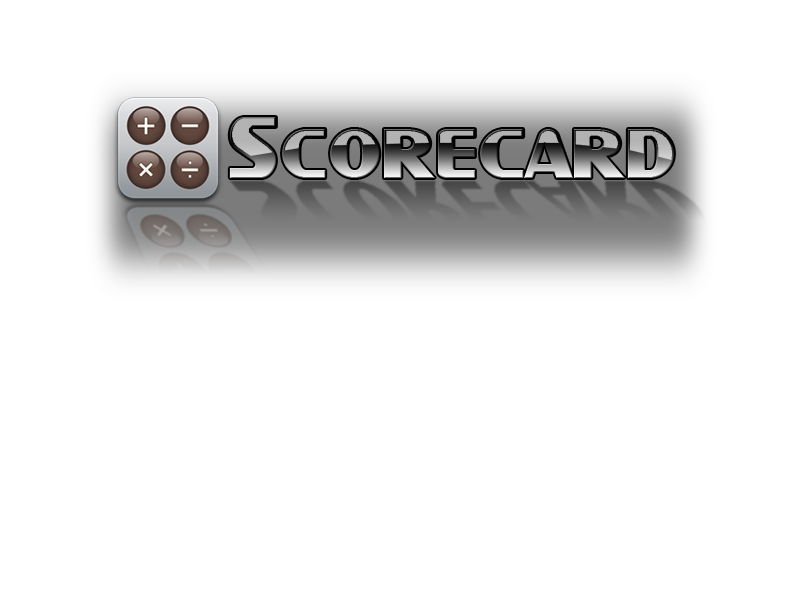
<style>
.page{position:relative;width:800px;height:600px;background:#ffffff}
.page>*{position:absolute;margin:0}
.t1{font:92.1px "SFIntellivised";letter-spacing:0.01em;color:#000000}
</style>
<div class="page">
<p class="t1" style="left:229px;top:117px;width:445px;height:61px">Scorecard</p>
</div>
